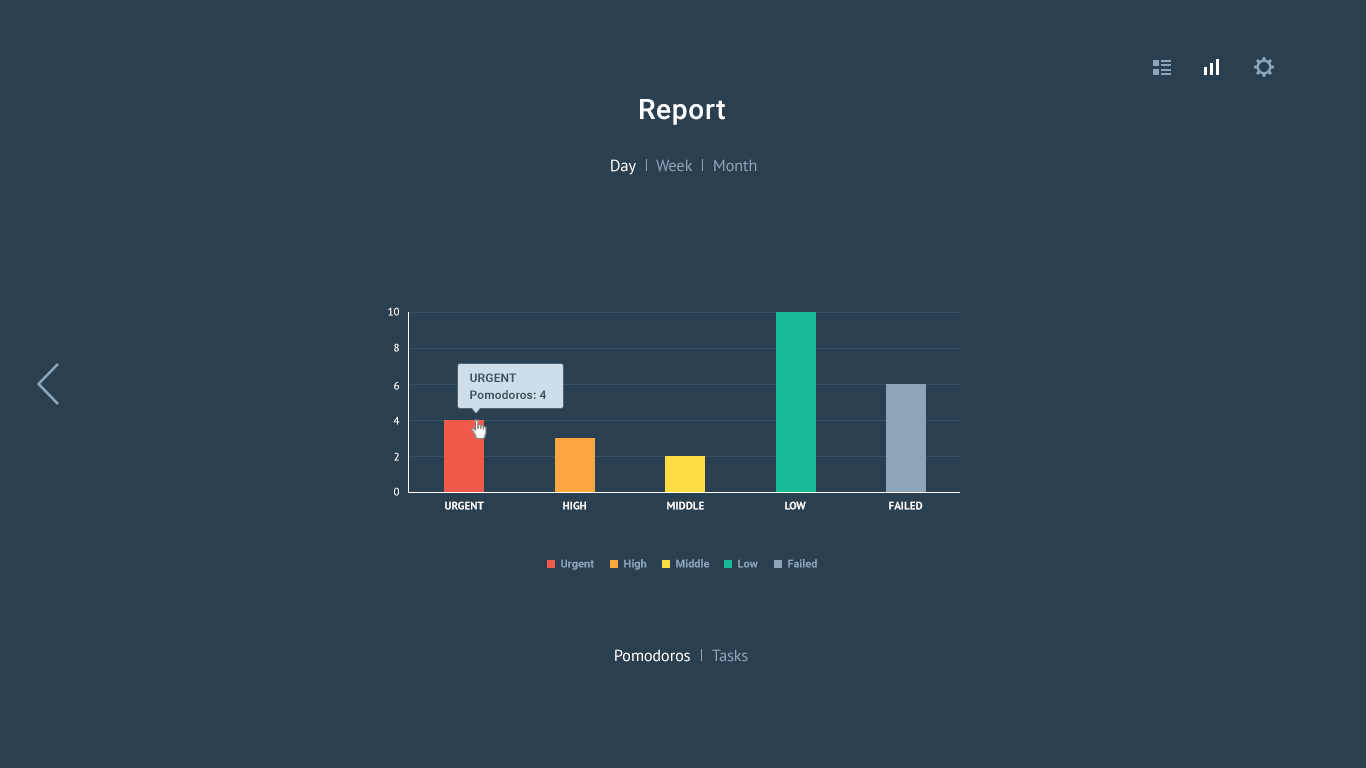
<style>
.page{position:relative;width:1366px;height:768px;background:#2a3f50}
.page>*{position:absolute;margin:0}
.t1{font:28px "Roboto-Medium";letter-spacing:0.025em;color:#ffffff}
.t2{font:16px "PTSans-Regular";color:#ffffff}
.t3{font:16px "PTSans-Regular";color:#8ea5b8}
.t4{font:11px "PTSans-Regular";color:#ffffff}
.t5{font:12px "Roboto-Bold";letter-spacing:0.01em;color:#3c5162}
.t6{font:11px "PTSans-Bold";color:#ffffff;text-transform:uppercase}
.t7{font:11px "Roboto-Bold";color:#8da5b8}
.t8{font:16px "PTSans-Regular";color:#fefefe}
.t9{font:16px "PTSans-Regular";color:#8da5b8}
</style>
<div class="page">
<p class="t1" style="left:640px;top:99px;width:85px;height:26px">Report</p>
<p class="t2" style="left:611px;top:159px;width:25px;height:16px">Day</p>
<p class="t3" style="left:656px;top:159px;width:37px;height:13px">Week</p>
<p class="t3" style="left:714px;top:159px;width:43px;height:13px">Month</p>
<p class="t4" style="left:388px;top:307px;width:11px;height:9px">10</p>
<p class="t4" style="left:394px;top:343px;width:5px;height:9px">8</p>
<p class="t5" style="left:470px;top:373px;width:47px;height:9px">URGENT</p>
<p class="t4" style="left:394px;top:381px;width:5px;height:9px">6</p>
<p class="t5" style="left:470px;top:390px;width:76px;height:9px">Pomodoros: 4</p>
<p class="t4" style="left:393px;top:416px;width:7px;height:9px">4</p>
<p class="t4" style="left:394px;top:452px;width:5px;height:9px">2</p>
<p class="t4" style="left:394px;top:487px;width:5px;height:9px">0</p>
<p class="t6" style="left:445px;top:501px;width:39px;height:9px">Urgent</p>
<p class="t6" style="left:563px;top:501px;width:23px;height:9px">High</p>
<p class="t6" style="left:667px;top:501px;width:37px;height:9px">Middle</p>
<p class="t6" style="left:785px;top:501px;width:21px;height:9px">Low</p>
<p class="t6" style="left:889px;top:501px;width:34px;height:9px">Failed</p>
<p class="t7" style="left:561px;top:559px;width:33px;height:11px">Urgent</p>
<p class="t7" style="left:624px;top:559px;width:23px;height:11px">High</p>
<p class="t7" style="left:676px;top:559px;width:34px;height:9px">Middle</p>
<p class="t7" style="left:738px;top:559px;width:20px;height:9px">Low</p>
<p class="t7" style="left:788px;top:559px;width:29px;height:9px">Failed</p>
<p class="t8" style="left:615px;top:649px;width:75px;height:13px">Pomodoros</p>
<p class="t9" style="left:712px;top:649px;width:36px;height:13px">Tasks</p>
</div>
